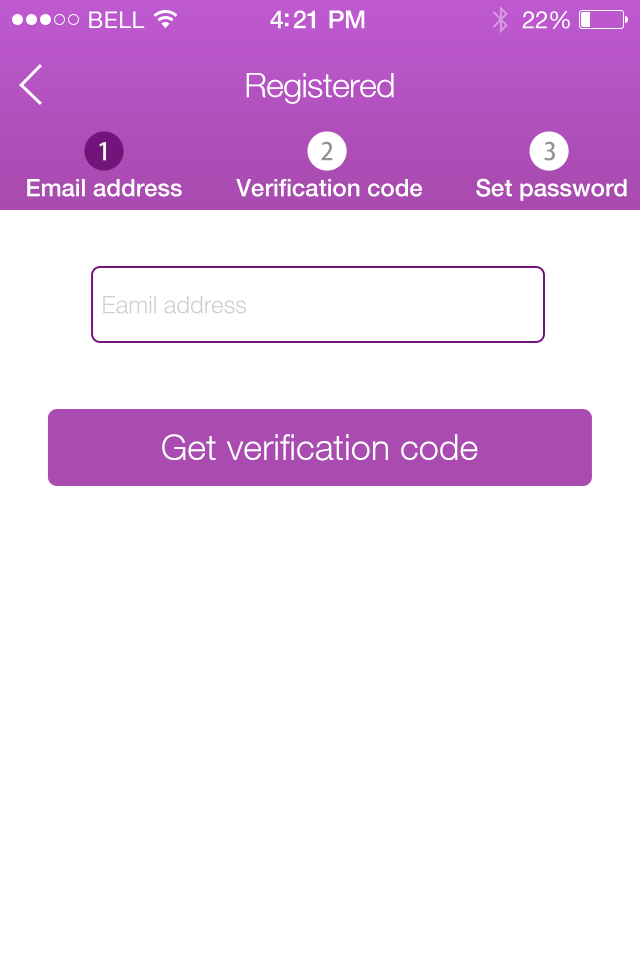
<style>
.page{position:relative;width:640px;height:960px;background:#ffffff}
.page>*{position:absolute;margin:0}
.t1{font:34px "HelveticaNeueLT-Light";letter-spacing:-0.02em;color:#ffffff}
.t2{font:24px "AdobeHeitiStd-Regular";color:#ffffff}
.t3{font:24px "AdobeHeitiStd-Regular";color:#929292}
.t4{font:24px "HelveticaNeueLT-Medium";color:#ffffff}
.t5{font:24px "HelveticaNeueLT-Light";color:#cecece}
.t6{font:36px "HelveticaNeueLT-Light";color:#ffffff}
</style>
<div class="page">
<p class="t1" style="left:246px;top:73px;width:148px;height:31px">Registered</p>
<p class="t2" style="left:99px;top:142px;width:7px;height:19px">1</p>
<p class="t3" style="left:321px;top:141px;width:12px;height:20px">2</p>
<p class="t3" style="left:544px;top:141px;width:11px;height:20px">3</p>
<p class="t4" style="left:27px;top:179px;width:155px;height:18px">Email address</p>
<p class="t4" style="left:236px;top:179px;width:186px;height:18px">Verification code</p>
<p class="t4" style="left:476px;top:178px;width:151px;height:23px">Set password</p>
<p class="t5" style="left:103px;top:296px;width:143px;height:18px">Eamil address</p>
<p class="t6" style="left:162px;top:434px;width:316px;height:27px">Get verification code</p>
</div>
